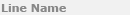
<style>
.page{position:relative;width:130px;height:15px;background:#f1f1f1}
.page>*{position:absolute;margin:0}
.t1{font:11px "Verdana-Bold";color:#888888}
</style>
<div class="page">
<p class="t1" style="left:1px;top:4px;width:65px;height:8px">Line Name</p>
</div>
